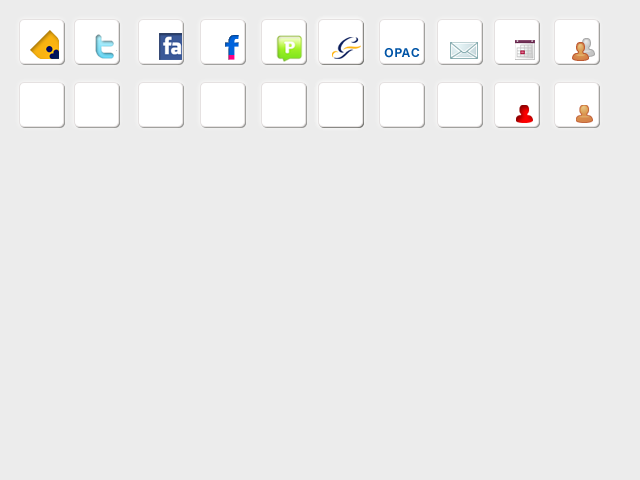
<style>
.page{position:relative;width:640px;height:480px;background:#ececec}
.page>*{position:absolute;margin:0}
.t1{font:12px "Arial-BoldMT";letter-spacing:0.05em;color:#0054a6}
</style>
<div class="page">
<p class="t1" style="left:384px;top:48px;width:36px;height:10px">OPAC</p>
</div>
